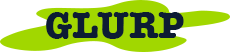
<style>
.page{position:relative;width:230px;height:52px;background:#ffffff}
.page>*{position:absolute;margin:0}
.t1{font:37.5px "AmericanTypewriter-Bold";color:#0d1c33}
</style>
<div class="page">
<p class="t1" style="left:46px;top:12px;width:138px;height:27px">GLURP</p>
</div>
